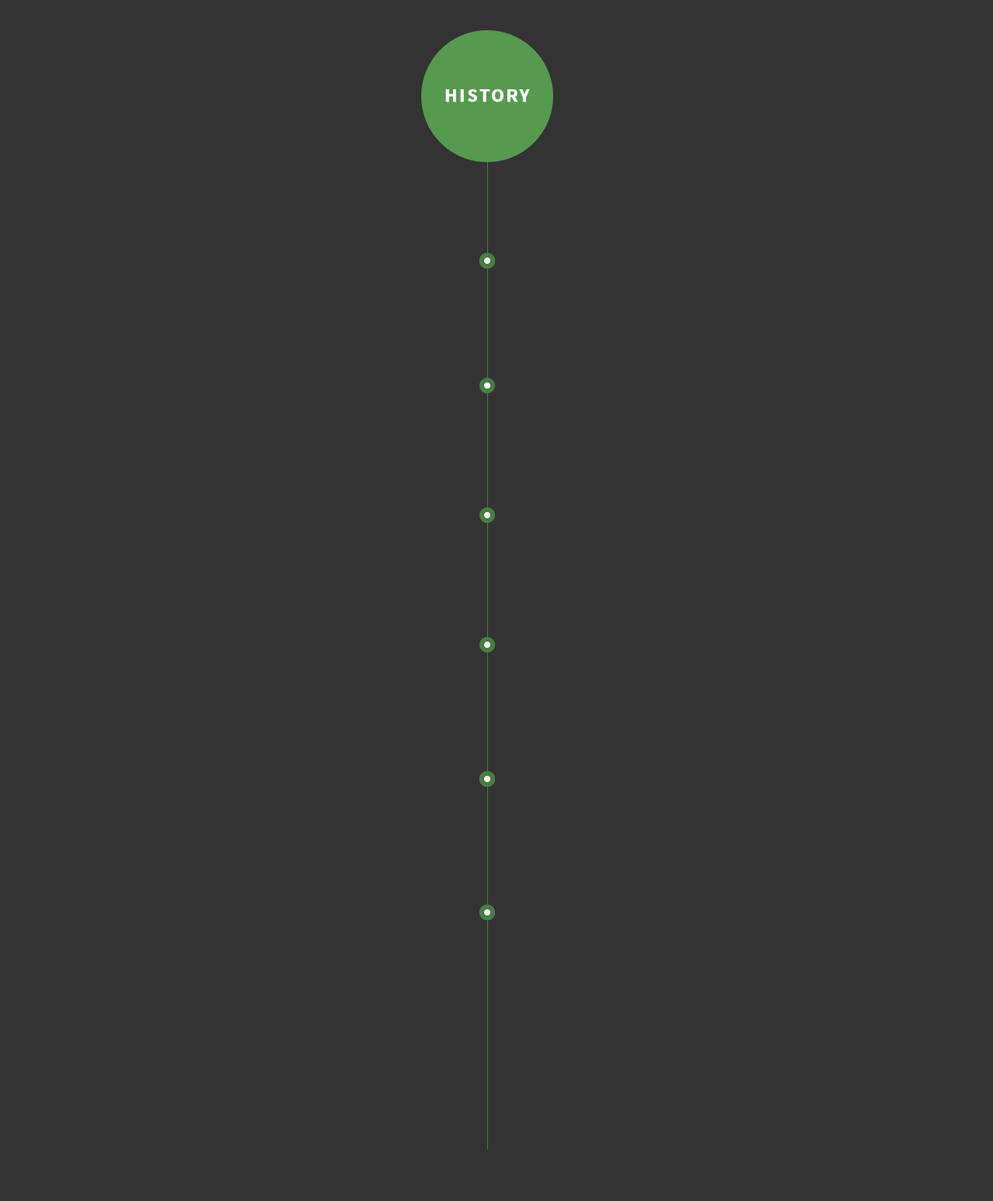
<style>
.page{position:relative;width:993px;height:1201px;background:#333333}
.page>*{position:absolute;margin:0}
.t1{font:16.3px "NotoSansKR-Bold";letter-spacing:0.12em;color:#ffffff;font-weight:bold}
</style>
<div class="page">
<p class="t1" style="left:445px;top:89px;width:85px;height:13px">HISTORY</p>
</div>
